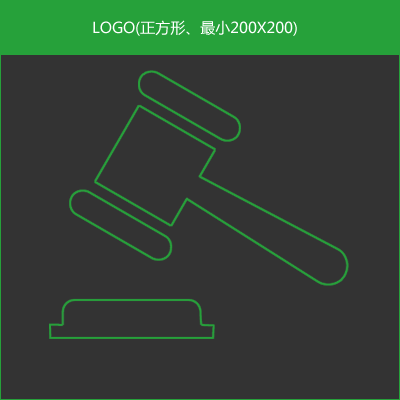
<style>
.page{position:relative;width:400px;height:400px;background:#333333}
.page>*{position:absolute;margin:0}
.t1{font:15px "MicrosoftYaHei";color:#ffffff;text-transform:uppercase}
</style>
<div class="page">
<p class="t1" style="left:93px;top:20px;width:204px;height:16px">LOGO(正方形、最小200x200)</p>
</div>
